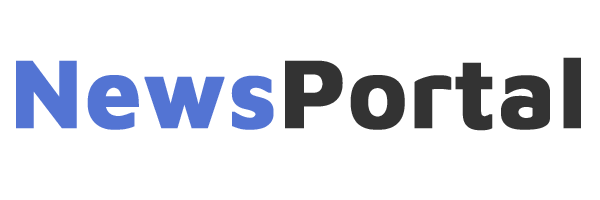
<style>
.page{position:relative;width:600px;height:200px;background:#ffffff}
.page>*{position:absolute;margin:0}
.t1{font:99.4px "MavenPro-Bold";color:#333333;font-weight:bold}
.t2{font:99.4px "MavenPro-Bold";color:#5374d3;font-weight:bold}
</style>
<div class="page">
<p class="t1" style="left:16px;top:57px;width:565px;height:74px"><span class="t2">News</span>Portal</p>
</div>
